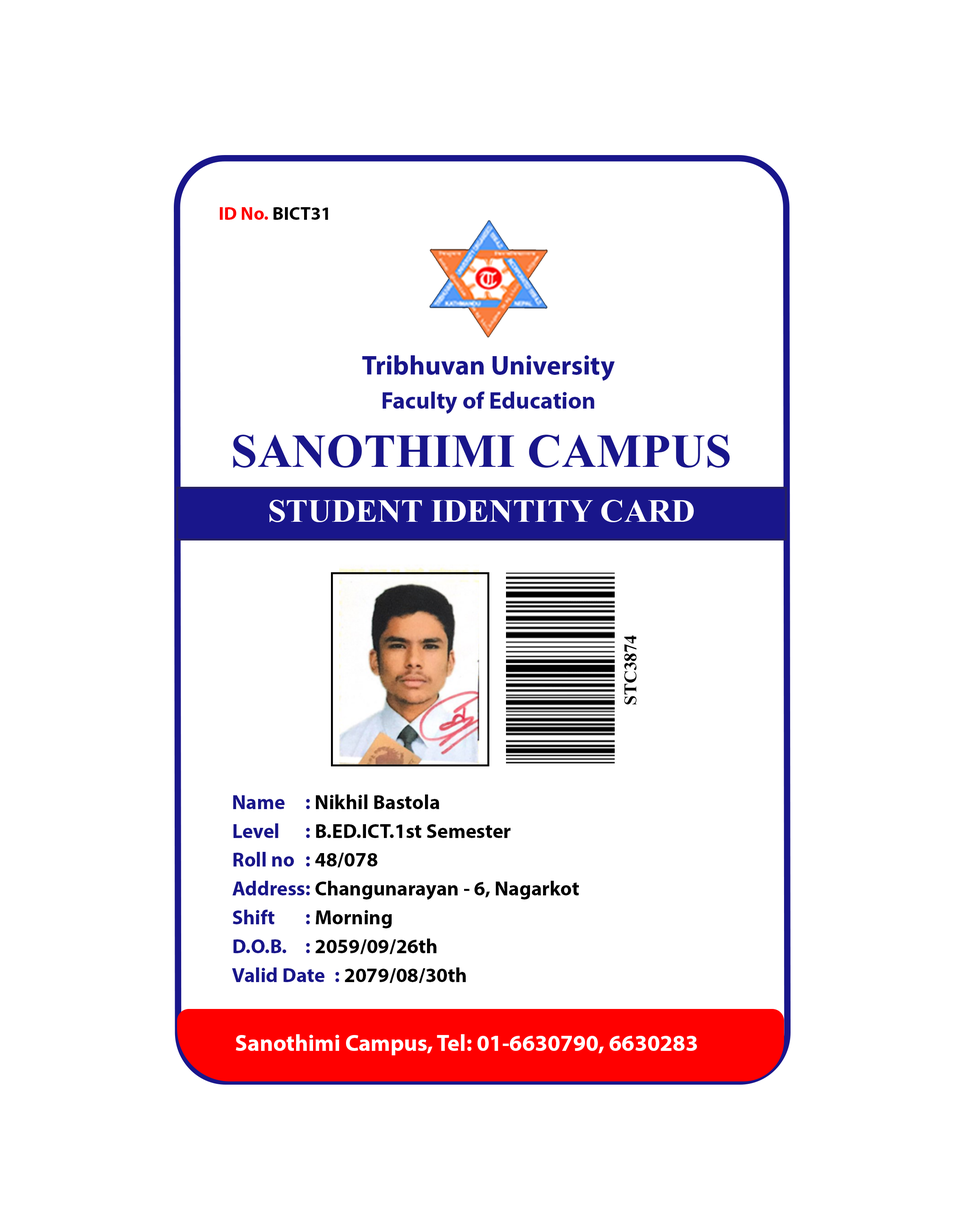
<style>
.page{position:relative;width:977px;height:1221px;background:#ffffff}
.page>*{position:absolute;margin:0}
.t1{font:18.7px "MyriadPro-Bold";color:#ff0000}
.t2{font:18.7px "MyriadPro-Bold";color:#000000}
.t3{font:27.1px "MyriadPro-Bold";color:#19168b}
.t4{font:23.7px "MyriadPro-Bold";color:#19168b}
.t5{font:47.8px "TimesNewRomanPS-BoldMT";color:#19168b}
.t6{font:32.9px "TimesNewRomanPS-BoldMT";color:#ffffff}
.t7{font:17.9px "TimesNewRomanPS-BoldMT";color:#010101}
.t8{font:20.3px/28.8px "MyriadPro-Bold";color:#010101}
.t9{font:20.3px/28.8px "MyriadPro-Bold";color:#19168b}
.t10{font:22.9px "MyriadPro-Bold";color:#ffffff}
</style>
<div class="page">
<p class="t1" style="left:220px;top:207px;width:108px;height:13px">ID No. <span class="t2">BICT31</span></p>
<p class="t3" style="left:362px;top:355px;width:253px;height:26px">Tribhuvan University</p>
<p class="t4" style="left:383px;top:391px;width:211px;height:23px">Faculty of Education</p>
<p class="t5" style="left:233px;top:434px;width:497px;height:34px">SANOTHIMI CAMPUS</p>
<p class="t6" style="left:269px;top:500px;width:425px;height:22px">STUDENT IDENTITY CARD</p>
<p class="t7" style="left:624px;top:635px;width:12px;height:69px;rotate:-90deg">STC3874</p>
<p class="t8" style="left:232px;top:794px;width:347px;height:189px"><span class="t9">Name  :</span> Nikhil Bastola<br><span class="t9">Level  :</span> B.ED.ICT.1st Semester<br><span class="t9">Roll no :</span> 48/078<br><span class="t9">Address:</span> Changunarayan - 6, Nagarkot<br><span class="t9">Shift   :</span> Morning<br><span class="t9">D.O.B.  :</span> 2059/09/26th<br><span class="t9">Valid Date :</span> 2079/08/30th</p>
<p class="t10" style="left:236px;top:1034px;width:461px;height:21px">Sanothimi Campus, Tel: 01-6630790, 6630283</p>
</div>
